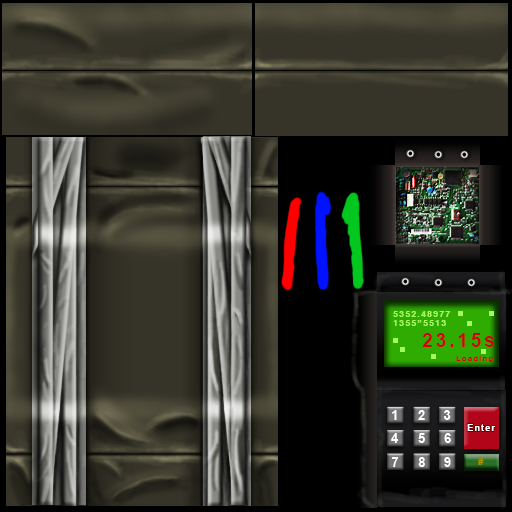
<style>
.page{position:relative;width:512px;height:512px}
.page>*{position:absolute;margin:0}
.t1{font:8.1px "Arial-BoldMT";letter-spacing:0.15em;color:#a5f860;scale:1.06 1}
.t2{font:18.6px "Arial-BoldMT";letter-spacing:0.15em;color:#cb0303}
.t3{font:7.3px "Arial-BoldMT";letter-spacing:0.15em;color:#cb0303;scale:1.06 1}
.t4{font:8.9px "Arial-BoldMT";letter-spacing:0.15em;color:#ffffff}
.t5{font:8.9px "Arial-BoldMT";letter-spacing:0.15em;color:#a39204}
</style>
<div class="page">
<p class="t1" style="left:393px;top:311px;width:57px;height:15px">5352.48977<br>1355”5513</p>
<p class="t2" style="left:422px;top:333px;width:72px;height:14px">23.15s</p>
<p class="t3" style="left:456px;top:356px;width:37px;height:6px">Loading</p>
<p class="t4" style="left:467px;top:424px;width:29px;height:7px">Enter</p>
<p class="t5" style="left:478px;top:458px;width:6px;height:7px">#</p>
</div>
